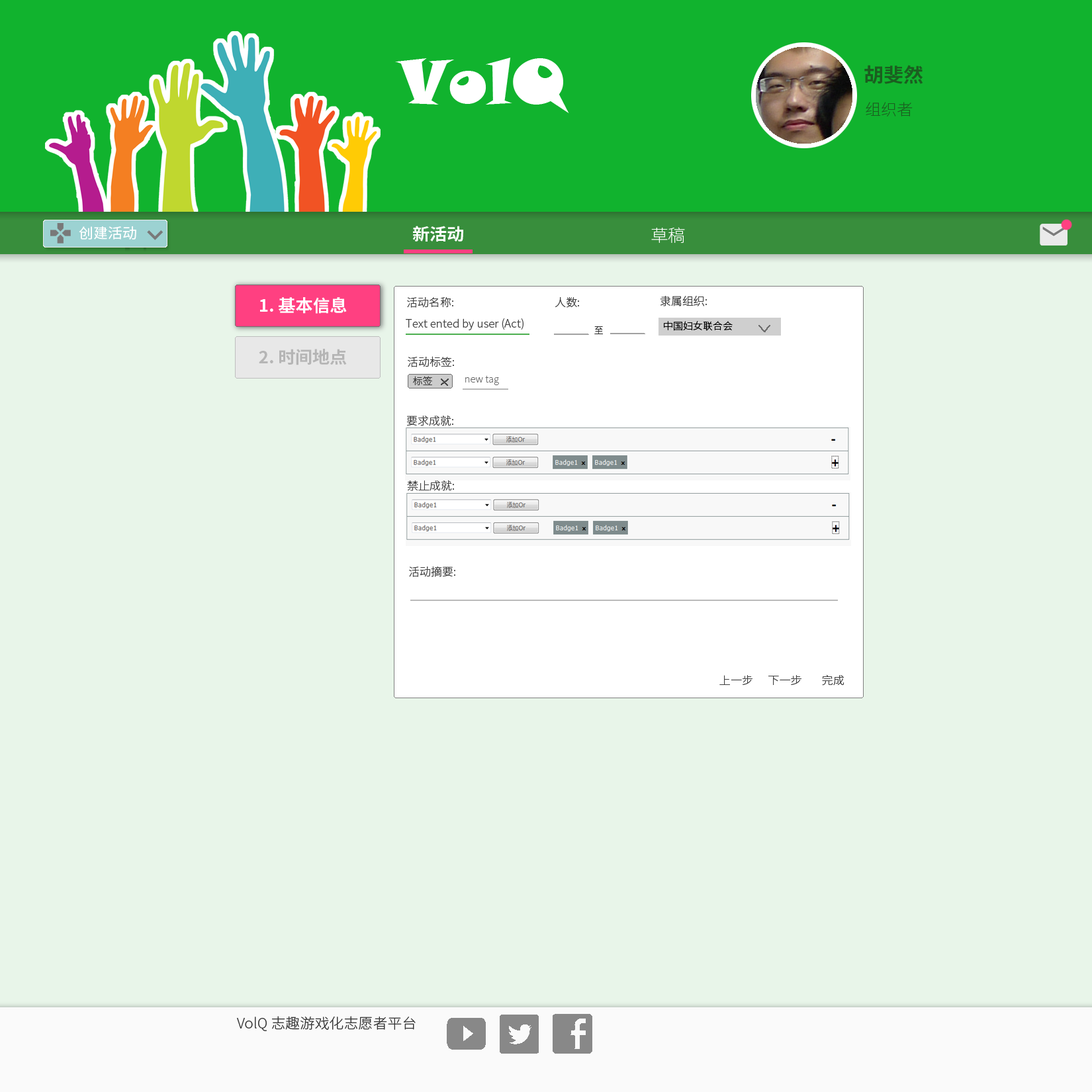
<style>
.page{position:relative;width:1092px;height:1092px;background:#e8f5e9}
.page>*{position:absolute;margin:0}
.t1{font:62.3px "SnapITC-Regular";color:#ffffff}
.t2{font:19.5px "NotoSansCJKsc-Bold";color:#1b5e20}
.t3{font:15.6px "NotoSansCJKsc-Thin";color:#1b5e20}
.t4{font:14.3px "NotoSansCJKsc-Regular";color:#ffffff}
.t5{font:16.9px "NotoSansCJKsc-Bold";color:#ffffff}
.t6{font:16.9px "NotoSansCJKsc-Thin";color:#ffffff}
.t7{font:11px "NotoSansCJKsc-Light";color:#414141}
.t8{font:9.1px "NotoSansCJKsc-Light";color:#2d2d2d}
.t9{font:9.7px "NotoSansCJKsc-Light";color:#000000}
.t10{font:16.9px "NotoSansCJKsc-Bold";color:#b5b5b5}
.t11{font:9.7px "NotoSansCJKsc-Light";color:#3c3c3c}
.t12{font:9.7px "NotoSansCJKsc-Thin";color:#686868}
.t13{font:14.3px "NotoSansCJKsc-Light";color:#353535}
</style>
<div class="page">
<p class="t1" style="left:395px;top:58px;width:174px;height:55px">VolQ</p>
<p class="t2" style="left:864px;top:65px;width:59px;height:19px">胡斐然</p>
<p class="t3" style="left:866px;top:102px;width:47px;height:14px">组织者</p>
<p class="t4" style="left:79px;top:226px;width:57px;height:14px">创建活动</p>
<p class="t5" style="left:412px;top:226px;width:51px;height:16px">新活动</p>
<p class="t6" style="left:651px;top:227px;width:34px;height:16px">草稿</p>
<p class="t5" style="left:260px;top:297px;width:87px;height:17px">1. 基本信息</p>
<p class="t7" style="left:407px;top:296px;width:46px;height:12px">活动名称:</p>
<p class="t7" style="left:555px;top:296px;width:24px;height:12px">人数:</p>
<p class="t7" style="left:660px;top:296px;width:47px;height:10px">隶属组织:</p>
<p class="t7" style="left:406px;top:318px;width:117px;height:12px">Text ented by user (Act)</p>
<p class="t8" style="left:594px;top:326px;width:9px;height:8px">至</p>
<p class="t9" style="left:664px;top:321px;width:69px;height:10px">中国妇女联合会</p>
<p class="t10" style="left:259px;top:349px;width:88px;height:16px">2. 时间地点</p>
<p class="t7" style="left:408px;top:356px;width:46px;height:11px">活动标签:</p>
<p class="t11" style="left:413px;top:376px;width:19px;height:9px">标签</p>
<p class="t12" style="left:465px;top:375px;width:34px;height:10px">new tag</p>
<p class="t7" style="left:406px;top:415px;width:47px;height:11px">要求成就:</p>
<p class="t7" style="left:407px;top:480px;width:47px;height:11px">禁止成就:</p>
<p class="t7" style="left:409px;top:566px;width:46px;height:11px">活动摘要:</p>
<p class="t7" style="left:719px;top:674px;width:125px;height:12px">上一步      下一步        完成</p>
<p class="t13" style="left:237px;top:1016px;width:179px;height:15px">VolQ 志趣游戏化志愿者平台</p>
</div>
